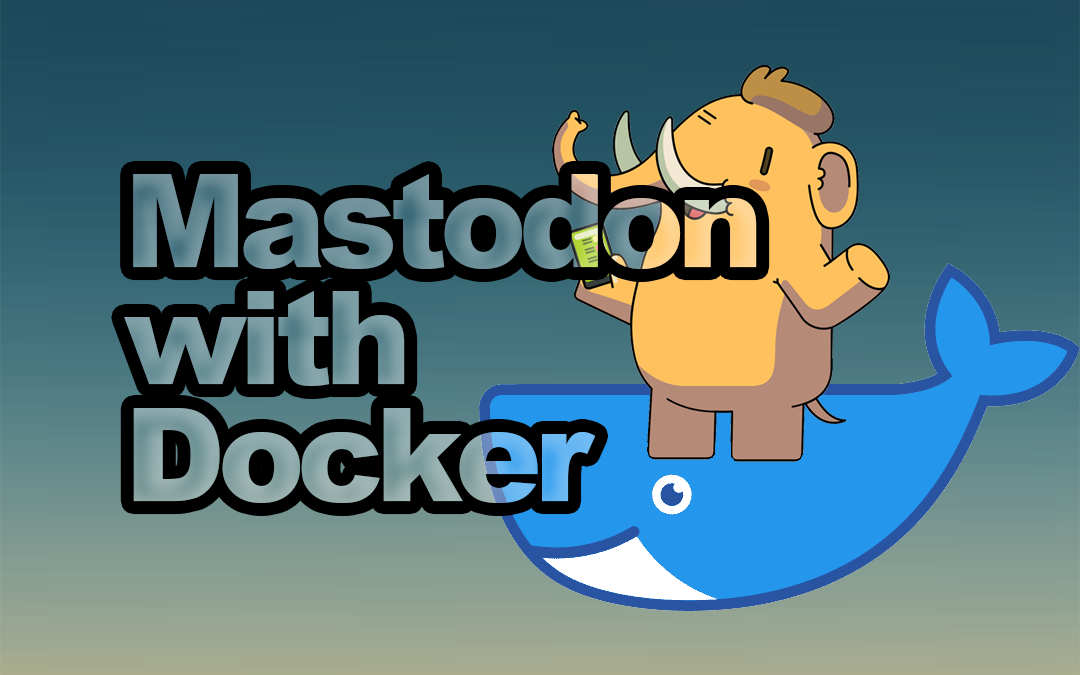
<style>
.page{position:relative;width:1080px;height:675px}
.page>*{position:absolute;margin:0}
.t1{font:130.2px/117px "Arial-Black";letter-spacing:-0.06em}
</style>
<div class="page">
<p class="t1" style="left:124px;top:174px;width:633px;height:329px">Mastodon<br>with<br>Docker</p>
</div>
